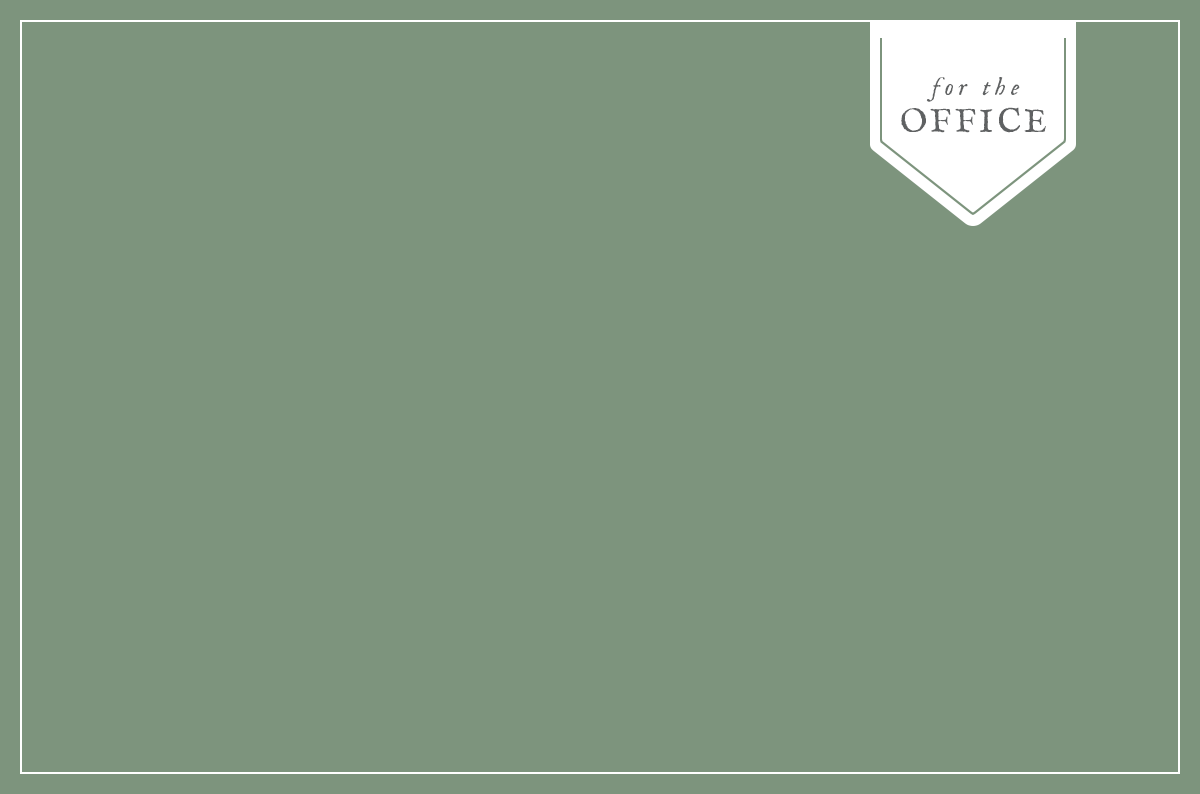
<style>
.page{position:relative;width:1200px;height:794px;background:#7d947d}
.page>*{position:absolute;margin:0}
.t1{font:25px "IM_FELL_English_PRO_Italic";letter-spacing:0.2em;color:#5f6162}
.t2{font:33.3px "IM_FELL_English_PRO_Roman";letter-spacing:0.1em;color:#5f6162;text-transform:uppercase}
</style>
<div class="page">
<p class="t1" style="left:926px;top:77px;width:94px;height:25px">for the</p>
<p class="t2" style="left:901px;top:107px;width:145px;height:26px">office</p>
</div>
